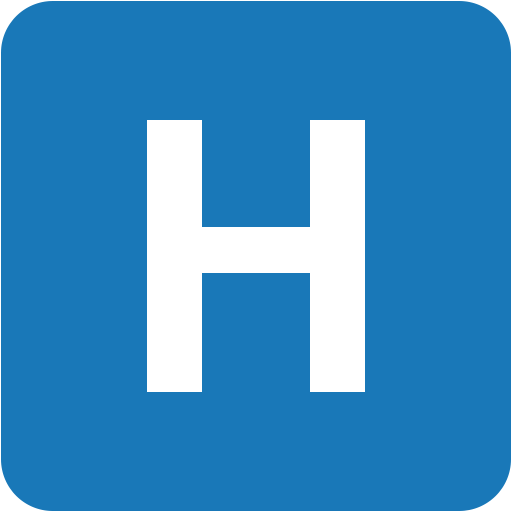
<style>
.page{position:relative;width:512px;height:512px;background:#1978b8}
.page>*{position:absolute;margin:0}
.t1{font:380px "Arial-BoldMT";color:#ffffff}
</style>
<div class="page">
<p class="t1" style="left:147px;top:120px;width:218px;height:272px">H</p>
</div>
